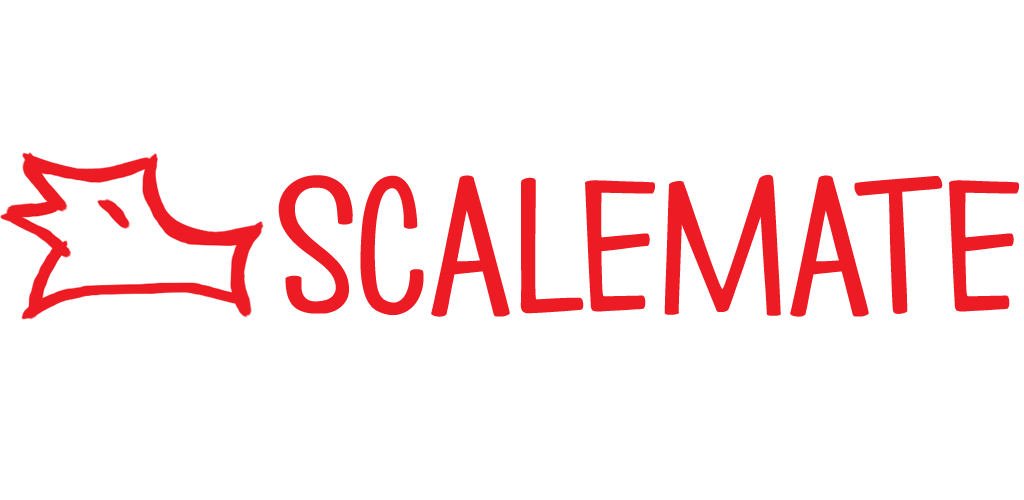
<style>
.page{position:relative;width:1024px;height:500px;background:#ffffff}
.page>*{position:absolute;margin:0}
.t1{font:250px "Love*Monster";color:#ed1c24;scale:1.07 1}
</style>
<div class="page">
<p class="t1" style="left:278px;top:174px;width:741px;height:143px">Scalemate</p>
</div>
